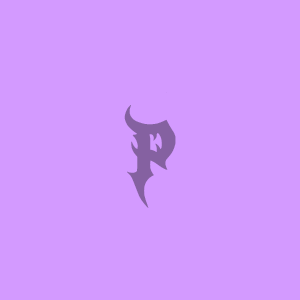
<style>
.page{position:relative;width:300px;height:300px;background:#d39aff}
.page>*{position:absolute;margin:0}
.t1{font:63.6px "ZeusBorne-Regular";letter-spacing:0.1em;color:#8561a1}
</style>
<div class="page">
<p class="t1" style="left:124px;top:92px;width:52px;height:116px;text-align:center">P</p>
</div>
